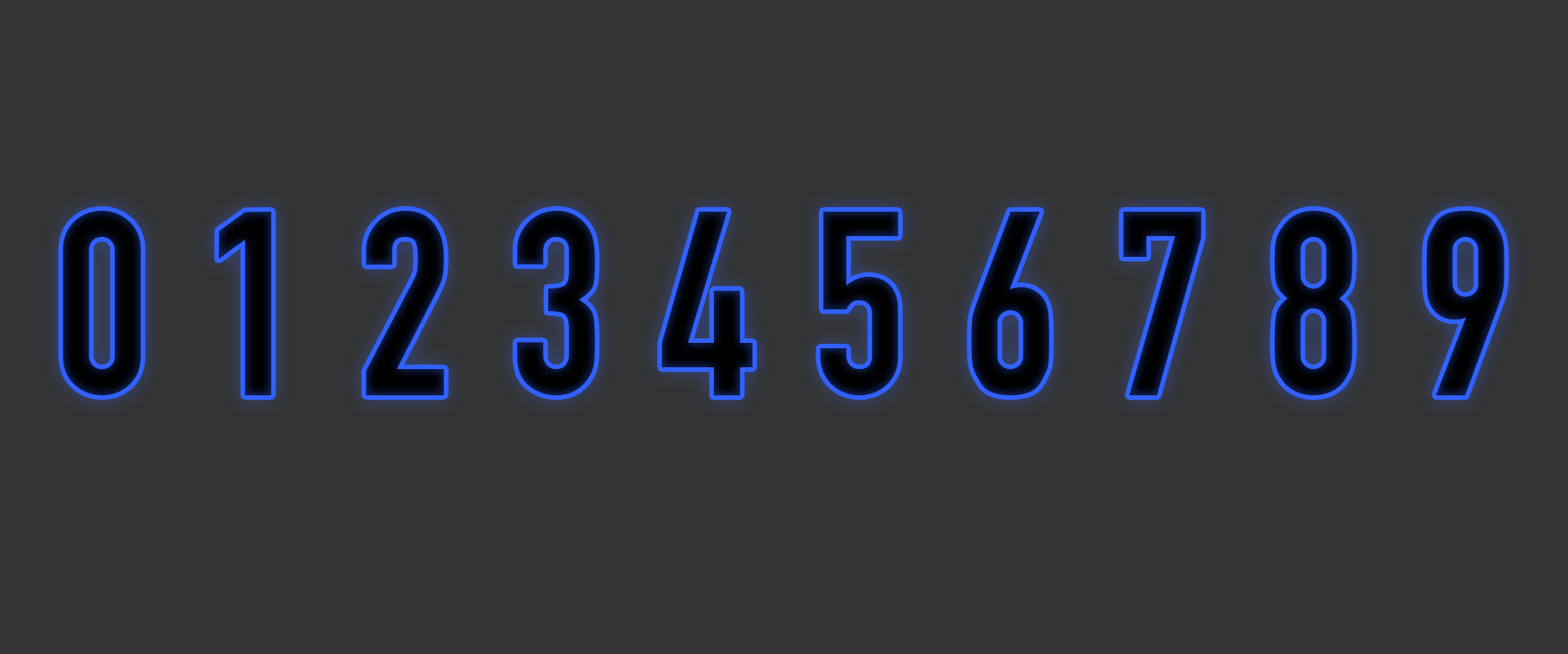
<style>
.page{position:relative;width:1568px;height:654px;background:#333333}
.page>*{position:absolute;margin:0}
.t1{font:256px "DINEngschrift";letter-spacing:0.22em;color:#03050e}
</style>
<div class="page">
<p class="t1" style="left:62px;top:211px;width:1443px;height:185px">0123456789</p>
</div>
